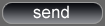
<style>
.page{position:relative;width:105px;height:26px;background:#666666}
.page>*{position:absolute;margin:0}
.t1{font:17px "ArialMT";color:#ffffff}
</style>
<div class="page">
<p class="t1" style="left:33px;top:5px;width:36px;height:14px">send</p>
</div>
